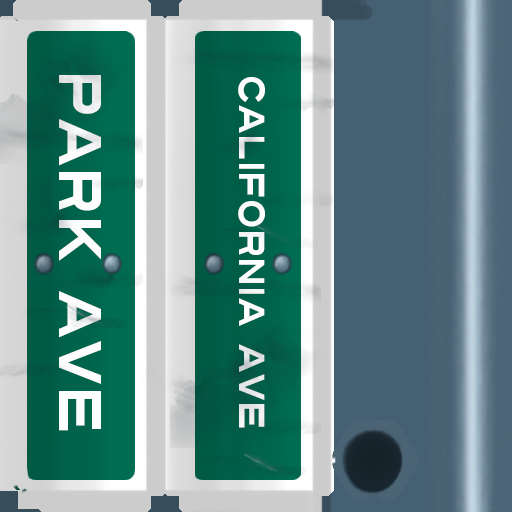
<style>
.page{position:relative;width:512px;height:512px}
.page>*{position:absolute;margin:0}
.t1{font:60px "Turnpike";color:#fefeff;scale:0.75 1}
.t2{font:36px "Turnpike";color:#fefeff;scale:0.75 1}
</style>
<div class="page">
<p class="t1" style="left:59px;top:75px;width:42px;height:356px;rotate:90deg">Park Ave</p>
<p class="t2" style="left:238px;top:77px;width:27px;height:351px;rotate:90deg">california ave</p>
</div>
